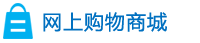
<style>
.page{position:relative;width:200px;height:43px;background:#ffffff}
.page>*{position:absolute;margin:0}
.t1{font:20px "MicrosoftYaHei";letter-spacing:0.05em;color:#0070c0}
</style>
<div class="page">
<p class="t1" style="left:43px;top:12px;width:124px;height:20px">网上购物商城</p>
</div>
